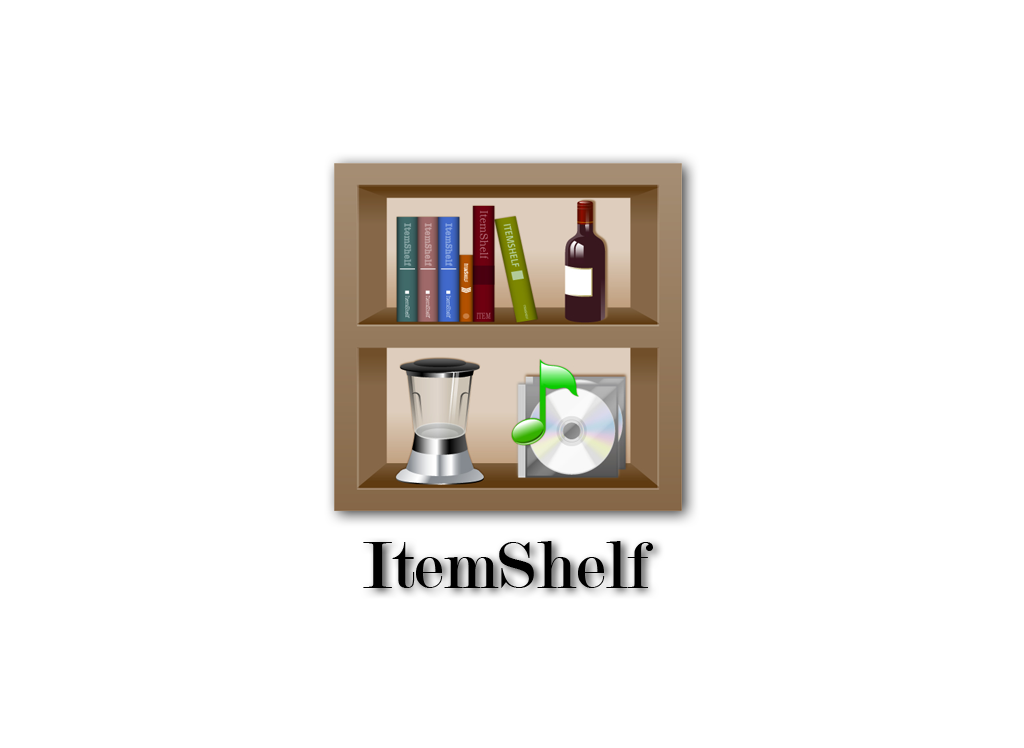
<style>
.page{position:relative;width:1024px;height:748px;background:#ffffff}
.page>*{position:absolute;margin:0}
.t1{font:72px "Modern-Regular";color:#000000}
</style>
<div class="page">
<p class="t1" style="left:363px;top:541px;width:290px;height:47px">ItemShelf</p>
</div>
